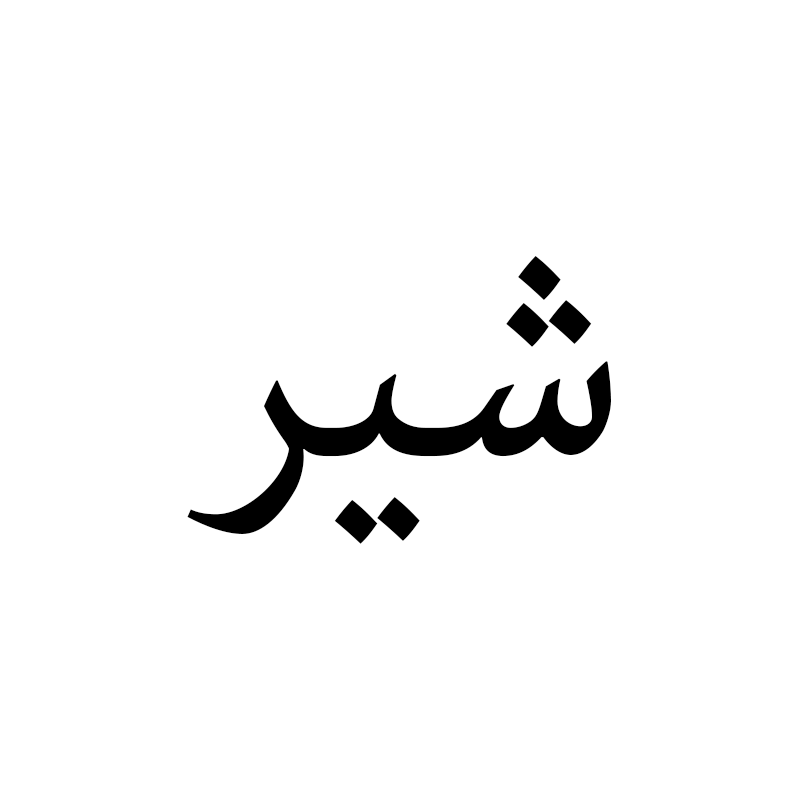
<style>
.page{position:relative;width:800px;height:800px;background:#ffffff}
.page>*{position:absolute;margin:0}
.t1{font:450px "AdobeArabic-Regular";color:#000000}
</style>
<div class="page">
<p class="t1" style="left:187px;top:256px;width:424px;height:288px">شیر</p>
</div>
